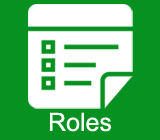
<style>
.page{position:relative;width:160px;height:140px;background:#069120}
.page>*{position:absolute;margin:0}
.t1{font:25px "ArialMT";color:#ffffff}
</style>
<div class="page">
<p class="t1" style="left:50px;top:112px;width:62px;height:20px">Roles</p>
</div>
